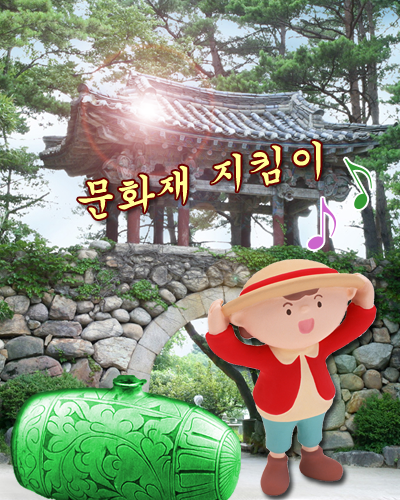
<style>
.page{position:relative;width:400px;height:500px}
.page>*{position:absolute;margin:0}
.t1{font:40px "Gungsuh";color:#ffff99}
</style>
<div class="page">
<p class="t1" style="left:78px;top:141px;width:243px;height:78px">문화재 지킴이</p>
</div>
